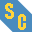
<style>
.page{position:relative;width:32px;height:32px;background:#4b8bbe}
.page>*{position:absolute;margin:0}
.t1{font:20px "Impact";letter-spacing:0.02em;color:#ffd43b}
</style>
<div class="page">
<p class="t1" style="left:5px;top:3px;width:9px;height:16px">S</p>
<p class="t1" style="left:18px;top:14px;width:8px;height:16px">C</p>
</div>
